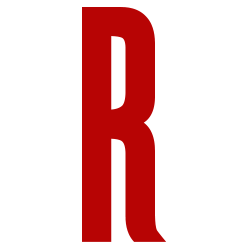
<style>
.page{position:relative;width:250px;height:250px;background:#ffffff}
.page>*{position:absolute;margin:0}
.t1{font:307px "GraphiqueProNext-Solid";color:#b70404}
</style>
<div class="page">
<p class="t1" style="left:82px;top:7px;width:85px;height:235px">r</p>
</div>
